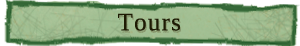
<style>
.page{position:relative;width:300px;height:46px}
.page>*{position:absolute;margin:0}
.t1{font:25px "Tinos";letter-spacing:0.05em;color:#1e1b04}
</style>
<div class="page">
<p class="t1" style="left:118px;top:13px;width:62px;height:18px">Tours</p>
</div>
